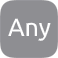
<style>
.page{position:relative;width:58px;height:58px;background:#8e8e92}
.page>*{position:absolute;margin:0}
.t1{font:25px "Ubuntu-Regular";color:#ffffff}
</style>
<div class="page">
<p class="t1" style="left:8px;top:18px;width:43px;height:23px">Any</p>
</div>
